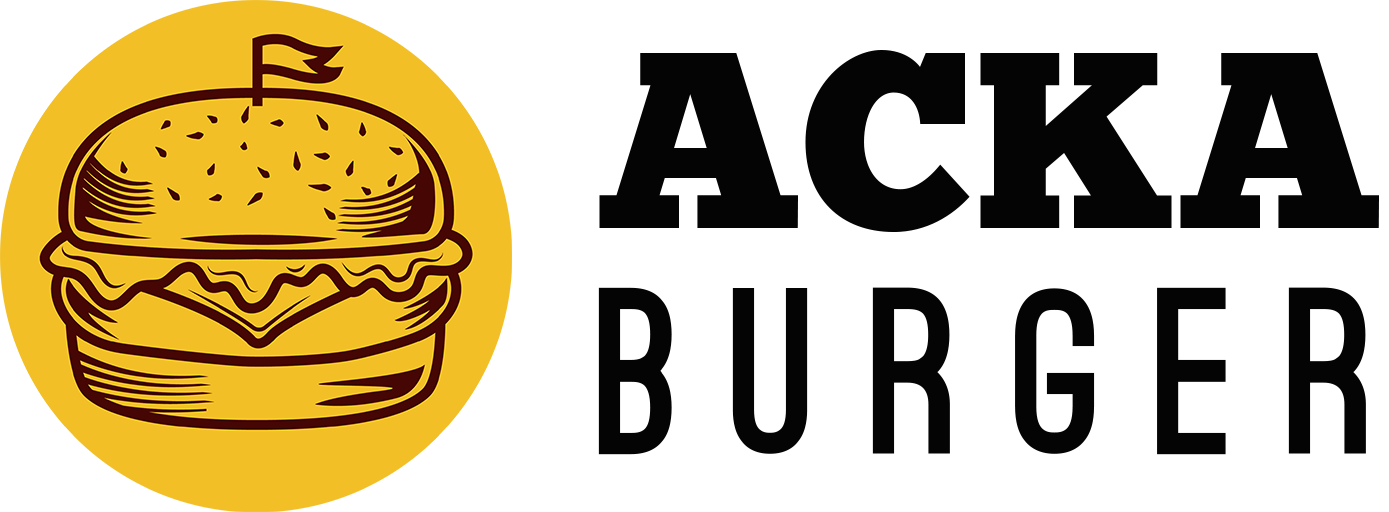
<style>
.page{position:relative;width:1389px;height:512px;background:#ffffff}
.page>*{position:absolute;margin:0}
.t1{font:250px "ChunkFive-Regular";color:#040404}
.t2{font:225px "OstrichSans-Black";letter-spacing:0.025em;color:#040404}
</style>
<div class="page">
<p class="t1" style="left:599px;top:50px;width:780px;height:182px">ACKA</p>
<p class="t2" style="left:598px;top:287px;width:768px;height:168px">BURGER</p>
</div>
